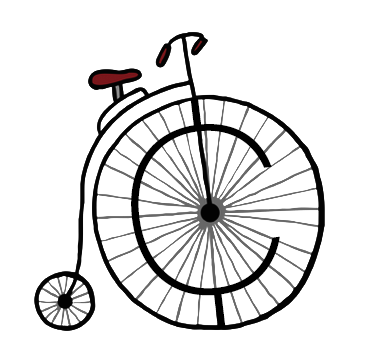
<style>
.page{position:relative;width:366px;height:360px;background:#ffffff}
.page>*{position:absolute;margin:0}
.t1{font:360px "AcuminConcept-Thin";letter-spacing:0.08em;color:#000000}
</style>
<div class="page">
<p class="t1" style="left:131px;top:97px;width:149px;height:231px;rotate:-7deg">¢</p>
</div>
